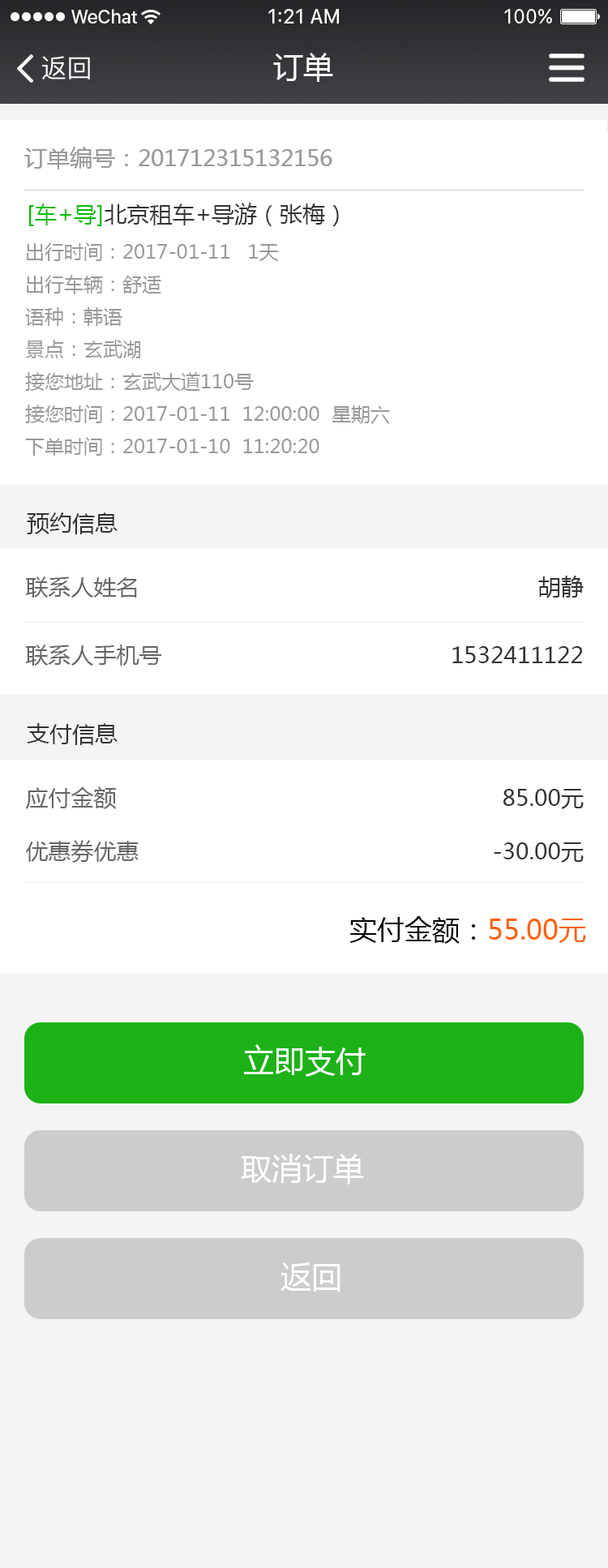
<style>
.page{position:relative;width:608px;height:1568px;background:#ffffff}
.page>*{position:absolute;margin:0}
.t1{font:30px "MicrosoftYaHei";color:#ffffff}
.t2{font:25.9px "PingFangSC-Regular";color:#ffffff}
.t3{font:22.7px "MicrosoftYaHei";color:#999999}
.t4{font:22.7px "MicrosoftYaHei";color:#333333}
.t5{font:22.7px "MicrosoftYaHei";color:#09ba07}
.t6{font:19.5px/35.7px "MicrosoftYaHei";color:#999999}
.t7{font:22.7px/71.3px "MicrosoftYaHei";color:#666666}
.t8{font:22.7px/71.3px "MicrosoftYaHei";color:#333333}
.t9{font:22.7px/56.8px "MicrosoftYaHei";color:#666666}
.t10{font:22.7px/56.8px "MicrosoftYaHei";color:#333333}
.t11{font:27.6px "MicrosoftYaHei";color:#ff6000}
.t12{font:27.6px "MicrosoftYaHei";color:#000000}
.t13{font:30.8px "MicrosoftYaHei";color:#ffffff}
</style>
<div class="page">
<p class="t1" style="left:273px;top:53px;width:60px;height:29px">订单</p>
<p class="t2" style="left:42px;top:56px;width:48px;height:24px">返回</p>
<p class="t3" style="left:24px;top:147px;width:308px;height:22px">订单编号：201712315132156</p>
<p class="t4" style="left:29px;top:203px;width:310px;height:23px"><span class="t5">[车+导]</span>北京租车+导游（张梅）</p>
<p class="t6" style="left:25px;top:242px;width:365px;height:214px">出行时间：2017-01-11   1天<br>出行车辆：舒适<br>语种：韩语<br>景点：玄武湖<br>接您地址：玄武大道110号<br>接您时间：2017-01-11  12:00:00  星期六<br>下单时间：2017-01-10  11:20:20</p>
<p class="t4" style="left:27px;top:512px;width:91px;height:22px">预约信息</p>
<p class="t7" style="left:25px;top:576px;width:136px;height:90px">联系人姓名<br>联系人手机号</p>
<p class="t8" style="left:452px;top:576px;width:132px;height:87px;text-align:right">胡静<br>1532411122</p>
<p class="t4" style="left:27px;top:723px;width:91px;height:22px">支付信息</p>
<p class="t9" style="left:25px;top:786px;width:114px;height:77px">应付金额<br>优惠券优惠</p>
<p class="t10" style="left:494px;top:789px;width:90px;height:74px;text-align:right">85.00元<br>-30.00元</p>
<p class="t11" style="left:349px;top:916px;width:237px;height:28px"><span class="t12">实付金额：</span>55.00元</p>
<p class="t13" style="left:244px;top:1044px;width:122px;height:33px">立即支付</p>
<p class="t13" style="left:241px;top:1154px;width:123px;height:31px">取消订单</p>
<p class="t13" style="left:281px;top:1262px;width:60px;height:30px">返回</p>
</div>
